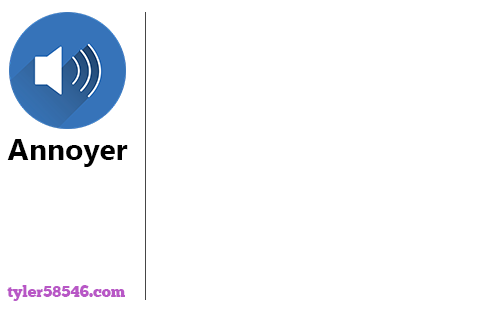
<style>
.page{position:relative;width:493px;height:312px;background:#ffffff}
.page>*{position:absolute;margin:0}
.t1{font:30px "SegoeUI-Bold";color:#000000}
.t2{font:16px "ChunkFiveEx";color:#b857c6}
</style>
<div class="page">
<p class="t1" style="left:7px;top:139px;width:121px;height:28px">Annoyer</p>
<p class="t2" style="left:7px;top:285px;width:118px;height:16px">tyler58546.com</p>
</div>
